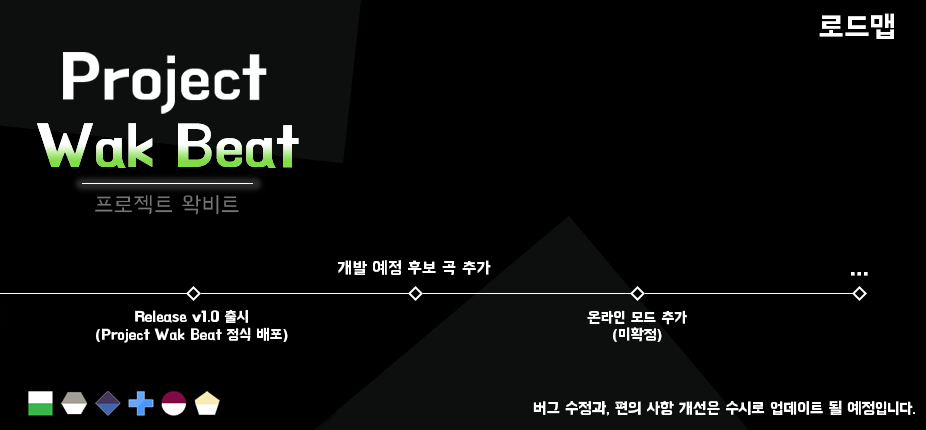
<style>
.page{position:relative;width:926px;height:430px;background:#000000}
.page>*{position:absolute;margin:0}
.t1{font:30.3px "BMHANNA11yrsoldOTF";color:#ffffff}
.t2{font:17px "BMHANNA11yrsoldOTF";color:#ffffff}
.t3{font:31px "BMHANNA11yrsoldOTF";color:#ffffff}
.t4{font:15.2px/17.4px "BMHANNA11yrsoldOTF";color:#ffffff}
.t5{font:16px "BMHANNA11yrsoldOTF";color:#ffffff}
</style>
<div class="page">
<p class="t1" style="left:819px;top:13px;width:75px;height:26px">로드맵</p>
<p class="t2" style="left:338px;top:260px;width:153px;height:15px">개발 예정 후보 곡 추가</p>
<p class="t3" style="left:851px;top:272px;width:17px;height:4px">...</p>
<p class="t4" style="left:96px;top:310px;width:192px;height:33px;text-align:center">Release v1.0 출시<br>(Project Wak Beat 정식 배포)</p>
<p class="t4" style="left:587px;top:310px;width:100px;height:32px;text-align:center">온라인 모드 추가<br>(미확정)</p>
<p class="t5" style="left:533px;top:400px;width:382px;height:16px">버그 수정과, 편의 사항 개선은 수시로 업데이트 될 예정입니다.</p>
</div>
